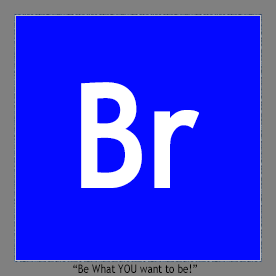
<style>
.page{position:relative;width:276px;height:276px;background:#0409ff}
.page>*{position:absolute;margin:0}
.t1{font:146.2px "TrebuchetMS-Bold";color:#ffffff;scale:0.85 1}
.t2{font:11.7px "TrebuchetMS";color:#000000;scale:0.85 1}
</style>
<div class="page">
<p class="t1" style="left:81px;top:82px;width:118px;height:106px">Br</p>
<p class="t2" style="left:73px;top:264px;width:124px;height:9px">“Be What YOU want to be!”</p>
</div>
